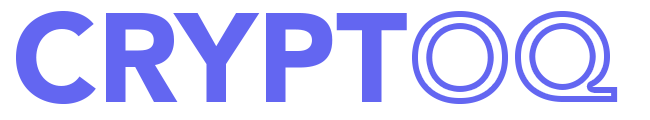
<style>
.page{position:relative;width:650px;height:120px;background:#ffffff}
.page>*{position:absolute;margin:0}
.t1{font:125px "AvenirLTStd-Black";color:#6366f1}
.t2{font:125px "AvenirLTStd-Black"}
</style>
<div class="page">
<p class="t1" style="left:16px;top:11px;width:391px;height:93px">CRYPT</p>
<p class="t2" style="left:412px;top:11px;width:206px;height:93px">OQ</p>
</div>
